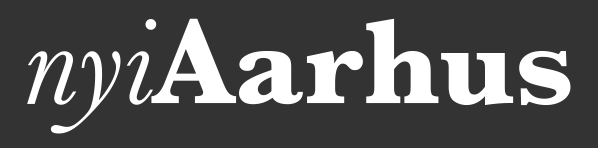
<style>
.page{position:relative;width:598px;height:148px;background:#333333}
.page>*{position:absolute;margin:0}
.t1{font:125px "Baskerville-Bold";color:#ffffff}
.t2{font:125px "Baskerville-Italic";color:#ffffff}
</style>
<div class="page">
<p class="t1" style="left:27px;top:18px;width:544px;height:116px"><span class="t2">nyi</span>Aarhus</p>
</div>
